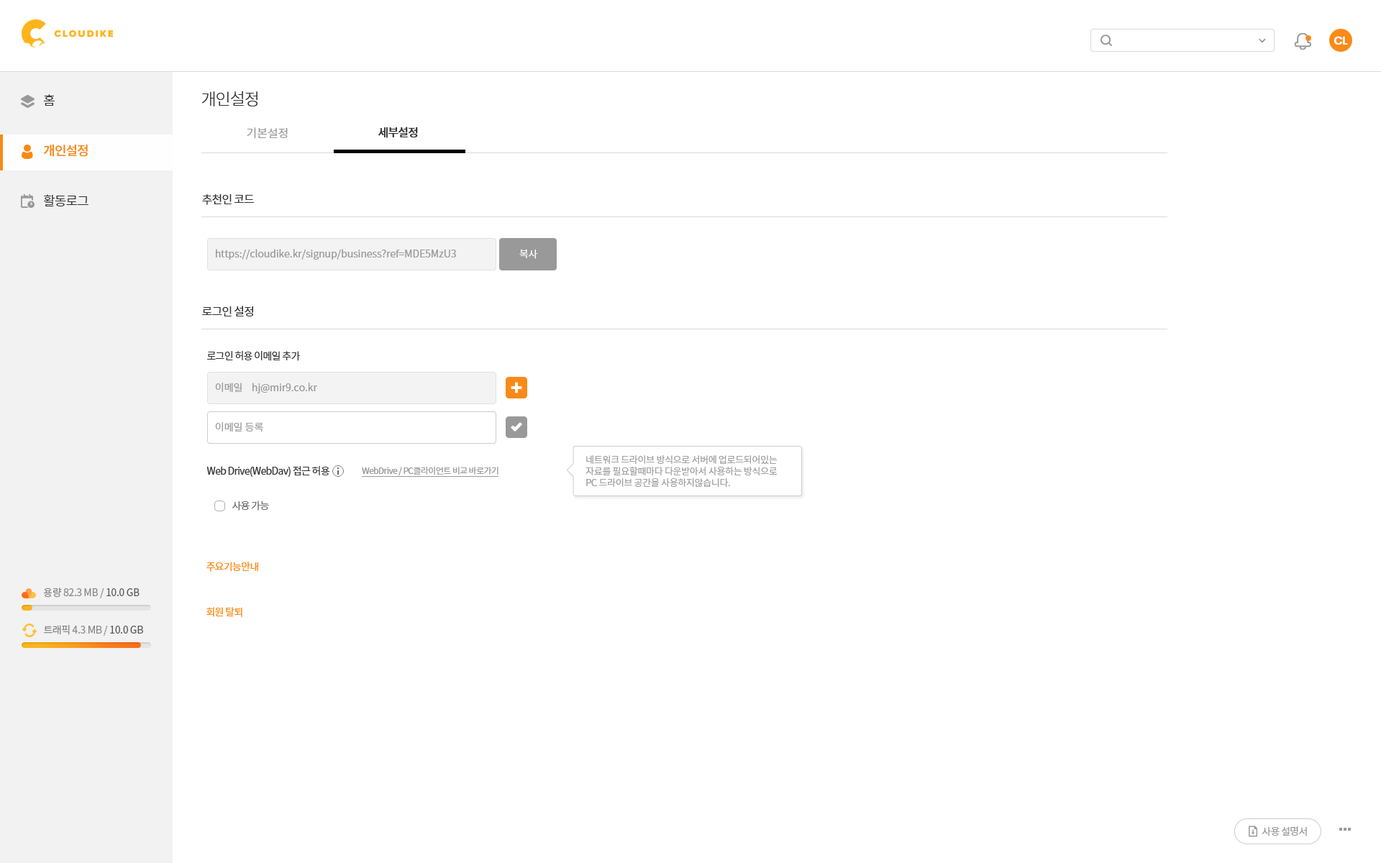
<style>
.page{position:relative;width:1381px;height:863px;background:#ffffff}
.page>*{position:absolute;margin:0}
.t1{font:11.5px "Poppins-SemiBold";letter-spacing:-0.05em;color:#ffffff}
.t2{font:12.9px/50.4px "NotoSansCJKkr-Medium";letter-spacing:-0.05em;color:#f98a17}
.t3{font:12.9px/50.4px "NotoSansCJKkr-DemiLight";letter-spacing:-0.05em;color:#333333}
.t4{font:16.5px "NotoSansCJKkr-Light";letter-spacing:-0.05em;color:#333333}
.t5{font:11.5px "NotoSansCJKkr-DemiLight";color:#999999}
.t6{font:11.5px "NotoSansCJKkr-Medium";letter-spacing:-0.05em;color:#333333}
.t7{font:11.5px "NotoSansCJKkr-Regular";letter-spacing:-0.05em;color:#333333}
.t8{font:10.1px "NotoSansCJKkr-DemiLight";color:#999999}
.t9{font:10.1px "NotoSansCJKkr-DemiLight";color:#ffffff}
.t10{font:10.1px "NotoSansCJKkr-Regular";letter-spacing:-0.05em;color:#333333}
.t11{font:9.4px/11.5px "NotoSansCJKkr-DemiLight";letter-spacing:-0.025em;color:#999999}
.t12{font:8.6px "NotoSansCJKkr-Regular";letter-spacing:-0.05em;color:#999999}
.t13{font:10.1px "NotoSansCJKkr-DemiLight";letter-spacing:-0.05em;color:#666666}
.t14{font:10.1px "NotoSansCJKkr-Regular";letter-spacing:-0.05em;color:#f98a17}
.t15{font:10.1px "NotoSansCJKkr-Regular";letter-spacing:-0.025em;color:#888888}
.t16{font:10.1px "NotoSansCJKkr-Regular";letter-spacing:-0.025em;color:#585858}
.t17{font:10.1px "NotoSansCJKkr-Regular";letter-spacing:-0.05em;color:#999999}
</style>
<div class="page">
<p class="t1" style="left:1334px;top:36px;width:14px;height:9px">CL</p>
<p class="t2" style="left:43px;top:94px;width:45px;height:112px"><span class="t3">홈<br></span>개인설정<br><span class="t3">활동로그</span></p>
<p class="t4" style="left:201px;top:91px;width:57px;height:15px">개인설정</p>
<p class="t5" style="left:247px;top:127px;width:41px;height:11px">기본설정</p>
<p class="t6" style="left:378px;top:127px;width:40px;height:11px">세부설정</p>
<p class="t7" style="left:202px;top:194px;width:52px;height:11px">추천인 코드</p>
<p class="t8" style="left:216px;top:249px;width:240px;height:11px">https://cloudike.kr/signup/business?ref=MDE5MzU3</p>
<p class="t9" style="left:519px;top:249px;width:18px;height:10px">복사</p>
<p class="t7" style="left:202px;top:306px;width:51px;height:11px">로그인 설정</p>
<p class="t10" style="left:207px;top:351px;width:93px;height:10px">로그인 허용 이메일 추가</p>
<p class="t8" style="left:215px;top:383px;width:102px;height:11px">이메일    hj@mir9.co.kr</p>
<p class="t8" style="left:215px;top:422px;width:48px;height:10px">이메일 등록</p>
<p class="t11" style="left:586px;top:455px;width:192px;height:32px">네트워크 드라이브 방식으로 서버에 업로드되어있는 <br>자료를 필요할때마다 다운받아서 사용하는 방식으로 <br>PC 드라이브 공간을 사용하지않습니다.</p>
<p class="t10" style="left:206px;top:466px;width:123px;height:11px">Web Drive(WebDav) 접근 허용</p>
<p class="t12" style="left:362px;top:467px;width:137px;height:9px">WebDrive / PC클라이언트 비교 바로가기</p>
<p class="t13" style="left:232px;top:501px;width:37px;height:10px">사용 가능</p>
<p class="t14" style="left:206px;top:562px;width:52px;height:10px">주요기능안내</p>
<p class="t15" style="left:43px;top:588px;width:97px;height:11px">용량 82.3 MB / <span class="t16">10.0 GB</span></p>
<p class="t14" style="left:206px;top:607px;width:36px;height:10px">회원 탈퇴</p>
<p class="t15" style="left:44px;top:625px;width:99px;height:11px">트래픽 4.3 MB / <span class="t16">10.0 GB</span></p>
<p class="t17" style="left:1262px;top:827px;width:45px;height:10px">사용 설명서</p>
</div>
